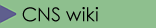
<style>
.page{position:relative;width:156px;height:28px;background:#8ebf8e}
.page>*{position:absolute;margin:0}
.t1{font:19px "CenturyGothic";color:#000000}
</style>
<div class="page">
<p class="t1" style="left:22px;top:7px;width:76px;height:15px">CNS wiki</p>
</div>
